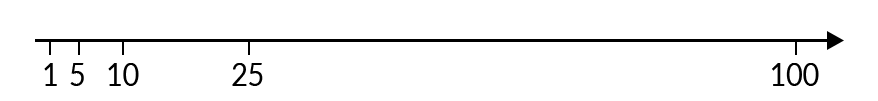
<style>
.page{position:relative;width:878px;height:101px;background:#ffffff}
.page>*{position:absolute;margin:0}
.t1{font:32px "Lato-Regular";letter-spacing:0.005em;color:#000000;scale:0.9 1}
</style>
<div class="page">
<p class="t1" style="left:44px;top:63px;width:13px;height:23px">1</p>
<p class="t1" style="left:70px;top:63px;width:14px;height:23px">5</p>
<p class="t1" style="left:108px;top:63px;width:31px;height:23px">10</p>
<p class="t1" style="left:232px;top:63px;width:31px;height:23px">25</p>
<p class="t1" style="left:772px;top:63px;width:47px;height:23px">100</p>
</div>
